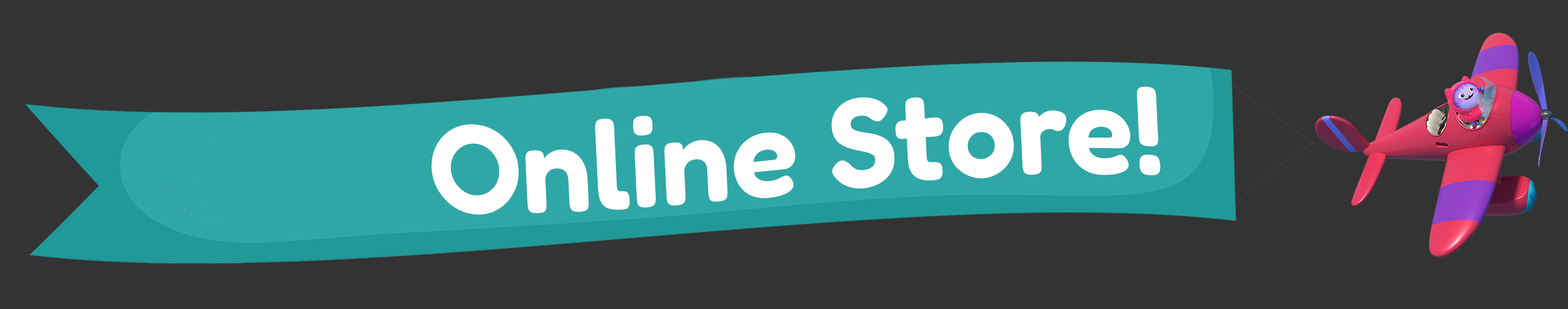
<style>
.page{position:relative;width:1568px;height:309px;background:#333333}
.page>*{position:absolute;margin:0}
.t1{font:125.9px "Fredoka-SemiBold";color:#ffffff}
</style>
<div class="page">
<p class="t1" style="left:431px;top:86px;width:729px;height:129px;rotate:-3deg">Online Store!</p>
</div>
